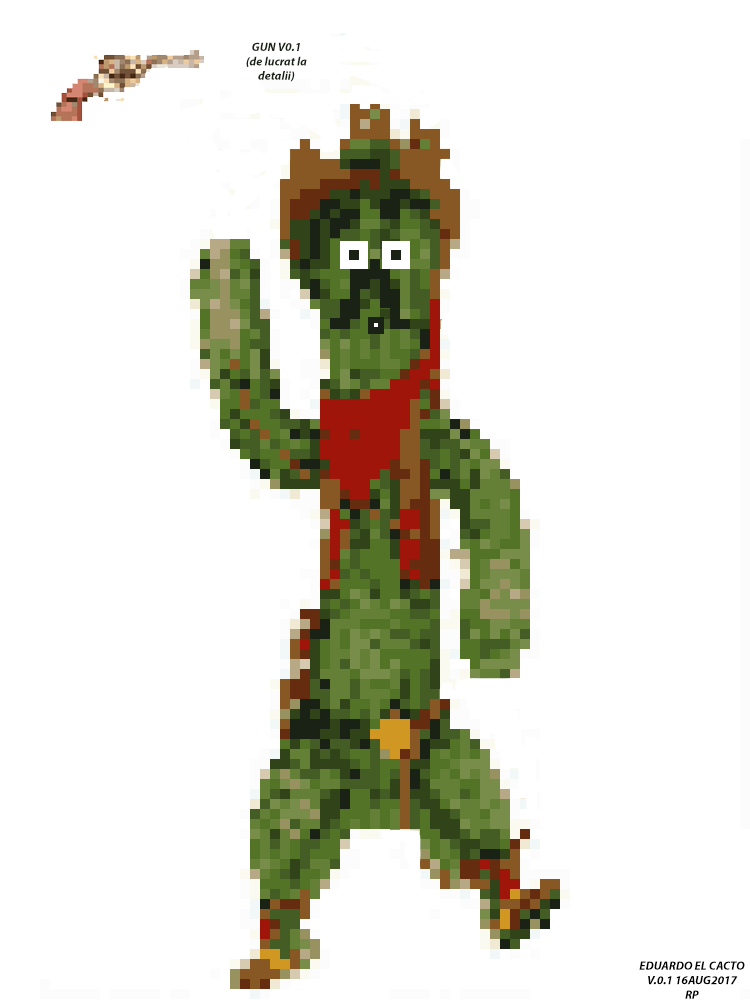
<style>
.page{position:relative;width:750px;height:1000px;background:#ffffff}
.page>*{position:absolute;margin:0}
.t1{font:12px "MyriadPro-BoldIt";color:#192214}
.t2{font:12px "MyriadPro-BoldIt";color:#000000}
</style>
<div class="page">
<p class="t1" style="left:246px;top:42px;width:61px;height:40px;text-align:center">GUN V0.1<br>(de lucrat la detalii)</p>
<p class="t2" style="left:639px;top:961px;width:106px;height:38px;text-align:center">EDUARDO EL CACTO<br>V.0.1 16AUG2017<br>RP</p>
</div>
